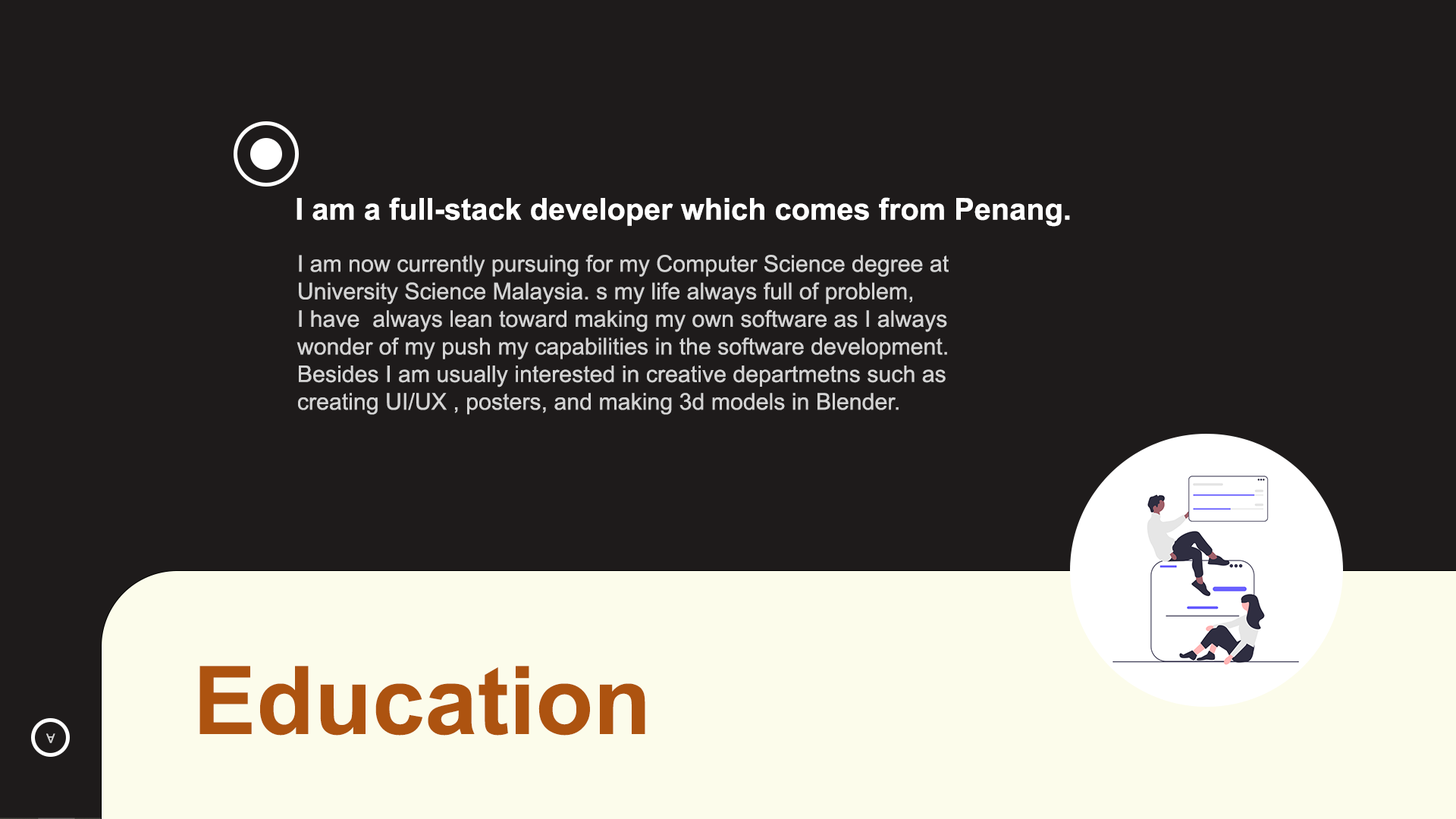
<style>
.page{position:relative;width:1456px;height:819px;background:#1e1b1b}
.page>*{position:absolute;margin:0}
.t1{font:30.2px "Arial-BoldMT";color:#ffffff}
.t2{font:23px "ArialMT";color:#d4d4d4}
.t3{font:94.8px "Arial-BoldMT";color:#ad5310}
.t4{font:12.9px "ArialMT";color:#d4d4d4}
</style>
<div class="page">
<p class="t1" style="left:297px;top:197px;width:773px;height:30px">I am a full-stack developer which comes from Penang.</p>
<p class="t2" style="left:297px;top:255px;width:652px;height:160px">I am now currently pursuing for my Computer Science degree at<br>University Science Malaysia. s my life always full of problem,   <br>I have  always lean toward making my own software as I always<br>wonder of my push my capabilities in the software development.<br>Besides I am usually interested in creative departmetns such as <br>creating UI/UX , posters, and making 3d models in Blender.</p>
<p class="t3" style="left:199px;top:666px;width:446px;height:70px">Education</p>
<p class="t4" style="left:46px;top:733px;width:9px;height:10px;rotate:180deg">A</p>
</div>
